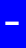
<style>
.page{position:relative;width:26px;height:48px;background:#0000ff}
.page>*{position:absolute;margin:0}
.t1{font:47.6px "KozGoPr6N-Regular";color:#ffffff}
</style>
<div class="page">
<p class="t1" style="left:5px;top:21px;width:14px;height:4px">-</p>
</div>
